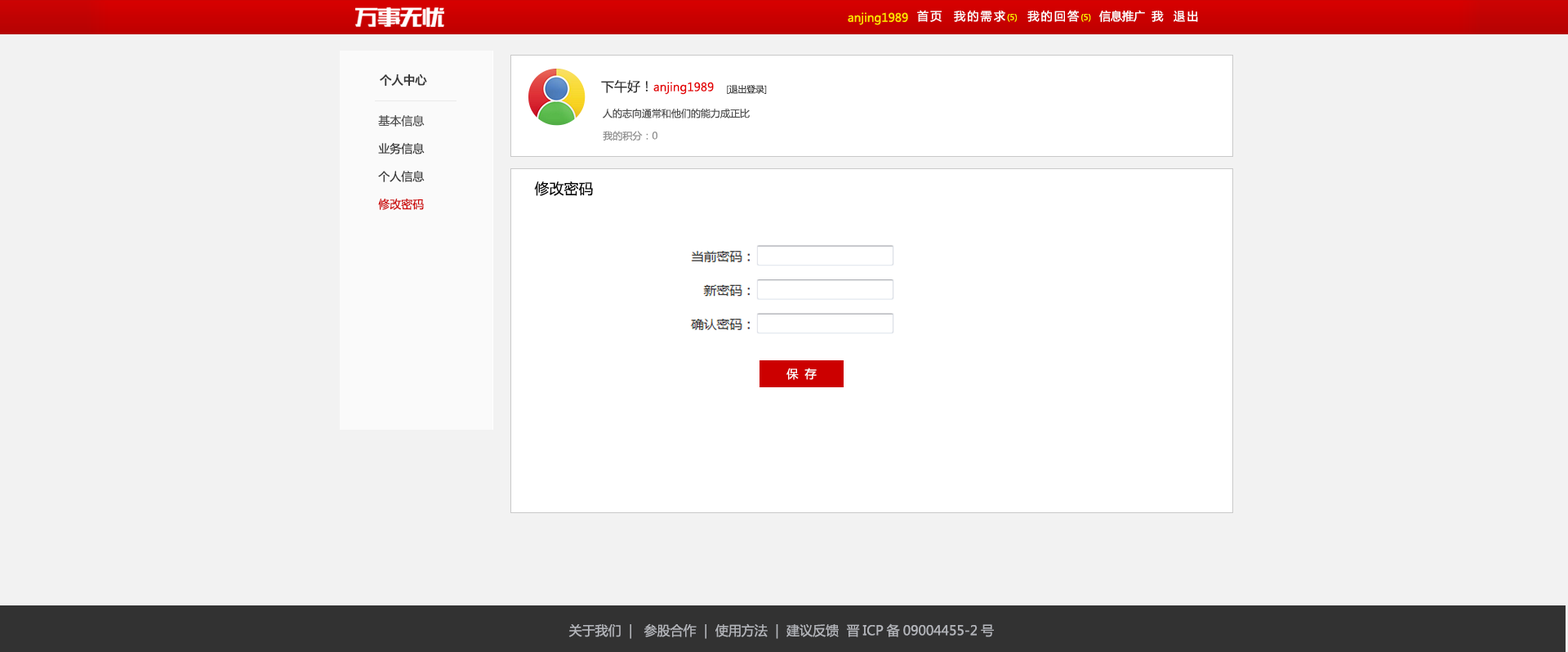
<style>
.page{position:relative;width:1568px;height:652px;background:#f2f2f2}
.page>*{position:absolute;margin:0}
.t1{font:11.4px "MicrosoftYaHei";color:#fee300}
.t2{font:11.4px "MicrosoftYaHei";letter-spacing:0.16em;color:#ffffff}
.t3{font:8.2px "MicrosoftYaHei";color:#fff600}
.t4{font:11.4px "MicrosoftYaHei";color:#ffffff}
.t5{font:11.4px "MicrosoftYaHei";color:#3a3a3a;font-weight:bold}
.t6{font:11.4px "MicrosoftYaHei";color:#e40002}
.t7{font:13.1px "MicrosoftYaHei";color:#2f2f2f}
.t8{font:9px "MicrosoftYaHei";letter-spacing:-0.02em;color:#3e3e3e}
.t9{font:9.8px "MicrosoftYaHei";color:#4f4f4f}
.t10{font:11.4px/27.8px "MicrosoftYaHei";color:#3a3a3a}
.t11{font:11.4px/27.8px "MicrosoftYaHei";color:#4f4f4f}
.t12{font:11.4px/27.8px "MicrosoftYaHei";color:#cc0000}
.t13{font:9.8px "MicrosoftYaHei";color:#8f8f8f}
.t14{font:14.7px "MicrosoftYaHei";color:#060606}
.t15{font:13.1px "MicrosoftYaHei";color:#b3b5ba}
</style>
<div class="page">
<p class="t1" style="left:848px;top:12px;width:60px;height:13px">anjing1989</p>
<p class="t2" style="left:917px;top:10px;width:281px;height:12px">首页  我的需求<span class="t3">(5)</span>  我的回答<span class="t3">(5)  </span><span class="t4"> 信息推广  我</span>  退出</p>
<p class="t5" style="left:380px;top:74px;width:47px;height:12px">个人中心</p>
<p class="t6" style="left:601px;top:80px;width:113px;height:15px"><span class="t7">下午好！</span>anjing1989</p>
<p class="t8" style="left:727px;top:85px;width:40px;height:9px">[退出登录]</p>
<p class="t9" style="left:603px;top:108px;width:147px;height:10px">人的志向通常和他们的能力成正比</p>
<p class="t10" style="left:378px;top:115px;width:47px;height:95px"><span class="t11">基本信息<br></span>业务信息<br>个人信息<br><span class="t12">修改密码</span></p>
<p class="t13" style="left:603px;top:131px;width:54px;height:10px">我的积分：0</p>
<p class="t14" style="left:534px;top:181px;width:59px;height:15px">修改密码</p>
<p class="t4" style="left:786px;top:368px;width:31px;height:12px">保  存</p>
<p class="t15" style="left:568px;top:623px;width:426px;height:16px">关于我们  |   参股合作  |  使用方法  |  建议反馈  晋ICP备09004455-2号</p>
</div>
